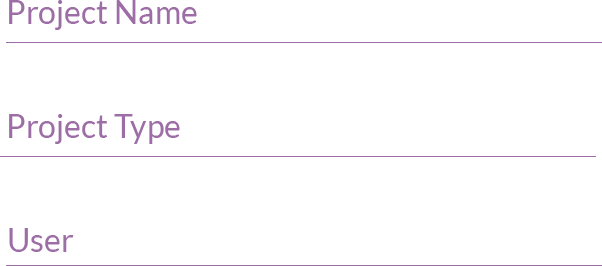
<style>
.page{position:relative;width:602px;height:266px;background:#ffffff}
.page>*{position:absolute;margin:0}
.t1{font:32px "Lato-Regular";color:#9d6da5}
</style>
<div class="page">
<p class="t1" style="left:9px;top:0px;width:188px;height:30px">Project Name</p>
<p class="t1" style="left:9px;top:114px;width:171px;height:30px">Project Type</p>
<p class="t1" style="left:9px;top:228px;width:65px;height:24px">User</p>
</div>
